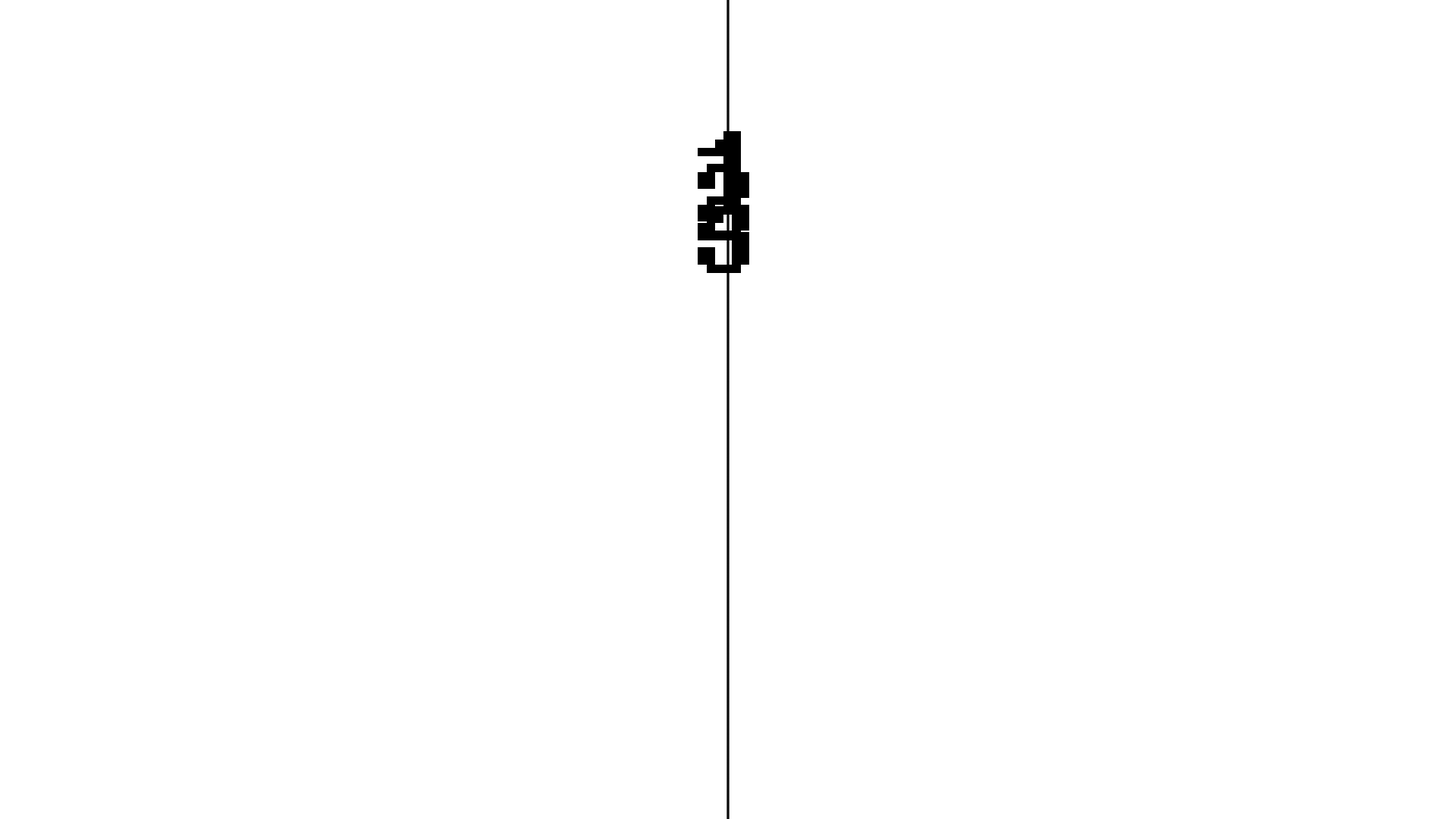
<style>
.page{position:relative;width:1456px;height:819px;background:#ffffff}
.page>*{position:absolute;margin:0}
.t1{font:109.2px "Fixedsys";letter-spacing:0.08em;color:#000000}
</style>
<div class="page">
<p class="t1" style="left:698px;top:131px;width:43px;height:77px">1</p>
<p class="t1" style="left:698px;top:164px;width:51px;height:76px">2</p>
<p class="t1" style="left:698px;top:196px;width:51px;height:77px">3</p>
</div>
